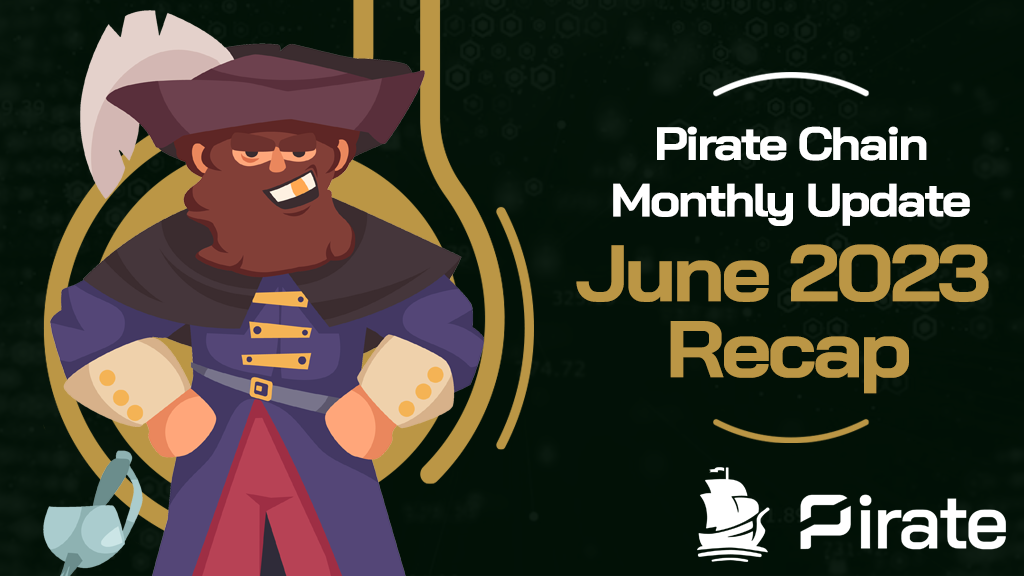
<style>
.page{position:relative;width:1024px;height:576px}
.page>*{position:absolute;margin:0}
.t1{font:46.5px "BaiJamjuree-Bold";letter-spacing:-0.05em;color:#ffffff;scale:1.1 1}
.t2{font:79.8px "BaiJamjuree-Bold";letter-spacing:-0.05em;color:#bb9645;scale:1.1 1}
</style>
<div class="page">
<p class="t1" style="left:657px;top:126px;width:270px;height:35px">Pirate Chain</p>
<p class="t1" style="left:613px;top:183px;width:357px;height:43px">Monthly Update</p>
<p class="t2" style="left:576px;top:244px;width:413px;height:58px">June 2023</p>
<p class="t2" style="left:670px;top:321px;width:239px;height:73px">Recap</p>
</div>
